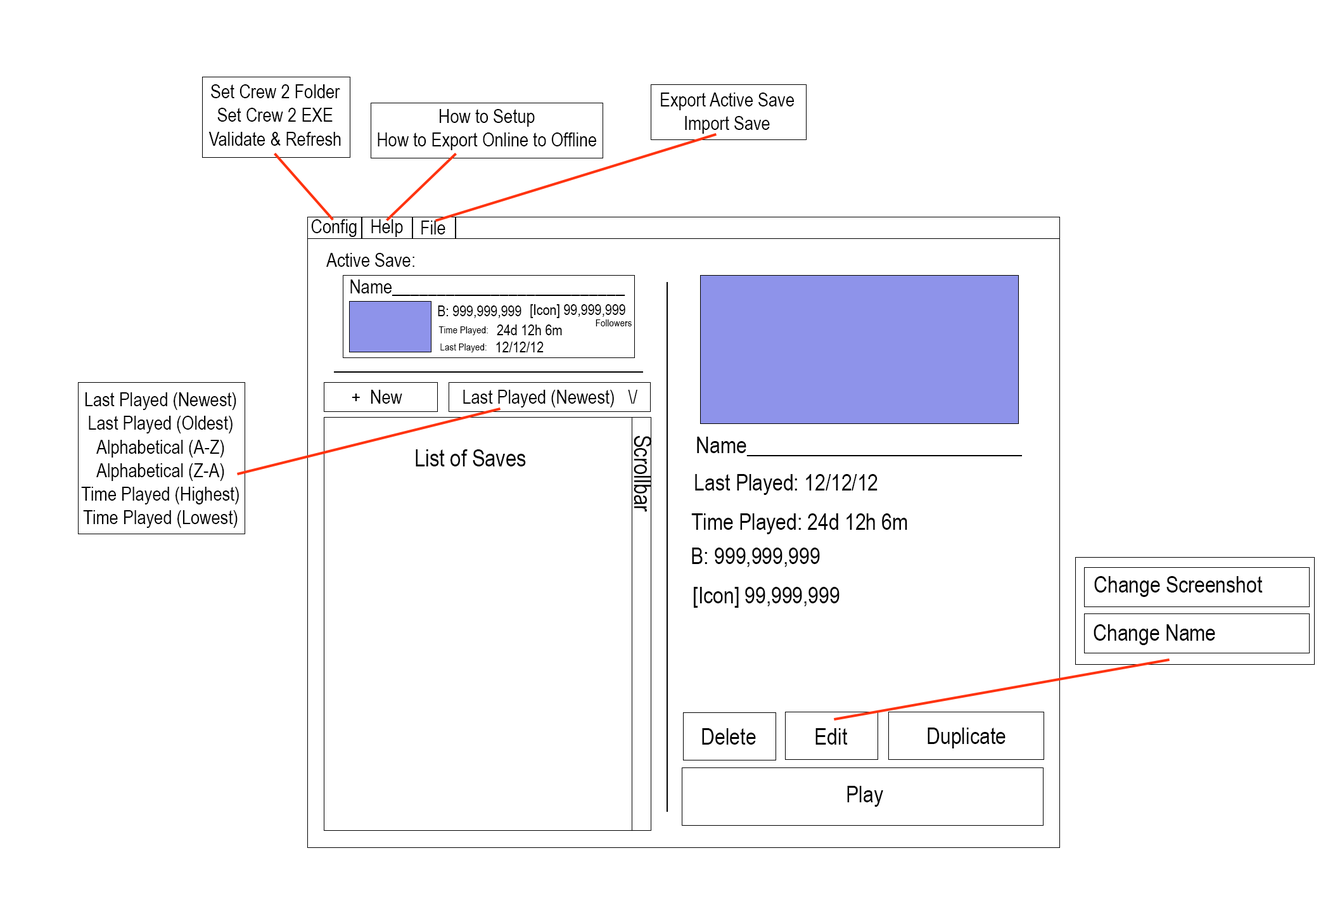
<style>
.page{position:relative;width:1328px;height:898px;background:#ffffff}
.page>*{position:absolute;margin:0}
.t1{font:19.6px "ArialNarrow";color:#000000}
.t2{font:15.2px "ArialNarrow";color:#000000}
.t3{font:10.4px "ArialNarrow";color:#000000}
.t4{font:23.8px "ArialNarrow";color:#000000}
.t5{font:23.2px "ArialNarrow";color:#000000}
</style>
<div class="page">
<p class="t1" style="left:208px;top:84px;width:133px;height:62px;text-align:center">Set Crew 2 Folder<br>Set Crew 2 EXE<br>Validate &amp; Refresh</p>
<p class="t1" style="left:661px;top:93px;width:133px;height:41px;text-align:center">Export Active Save<br>Import Save</p>
<p class="t1" style="left:378px;top:109px;width:218px;height:41px;text-align:center">How to Setup<br>How to Export Online to Offline</p>
<p class="t1" style="left:311px;top:219px;width:46px;height:18px">Config</p>
<p class="t1" style="left:371px;top:219px;width:32px;height:18px">Help</p>
<p class="t1" style="left:421px;top:221px;width:24px;height:13px">File</p>
<p class="t1" style="left:326px;top:253px;width:88px;height:14px">Active Save:</p>
<p class="t1" style="left:350px;top:279px;width:275px;height:17px">Name__________________________</p>
<p class="t2" style="left:438px;top:305px;width:83px;height:13px">B: 999,999,999</p>
<p class="t2" style="left:530px;top:304px;width:95px;height:14px">[Icon] 99,999,999</p>
<p class="t3" style="left:438px;top:326px;width:50px;height:9px">Time Played:</p>
<p class="t2" style="left:497px;top:324px;width:65px;height:11px">24d 12h 6m</p>
<p class="t3" style="left:596px;top:319px;width:36px;height:7px">Followers</p>
<p class="t2" style="left:496px;top:342px;width:48px;height:10px">12/12/12</p>
<p class="t3" style="left:440px;top:343px;width:47px;height:9px">Last Played:</p>
<p class="t1" style="left:352px;top:390px;width:50px;height:14px">New</p>
<p class="t1" style="left:463px;top:390px;width:174px;height:17px">Last Played (Newest)   \/</p>
<p class="t1" style="left:81px;top:392px;width:158px;height:136px;text-align:center">Last Played (Newest)<br>Last Played (Oldest)<br>Alphabetical (A-Z)<br>Alphabetical (Z-A)<br>Time Played (Highest)<br>Time Played (Lowest)</p>
<p class="t4" style="left:634px;top:435px;width:18px;height:77px;rotate:90deg">Scrollbar</p>
<p class="t5" style="left:697px;top:437px;width:325px;height:19px">Name__________________________</p>
<p class="t4" style="left:416px;top:449px;width:110px;height:17px">List of Saves</p>
<p class="t5" style="left:695px;top:474px;width:183px;height:21px">Last Played: 12/12/12</p>
<p class="t5" style="left:691px;top:513px;width:216px;height:21px">Time Played: 24d 12h 6m</p>
<p class="t5" style="left:692px;top:547px;width:128px;height:20px">B: 999,999,999</p>
<p class="t5" style="left:1094px;top:576px;width:169px;height:21px">Change Screenshot</p>
<p class="t5" style="left:694px;top:587px;width:146px;height:21px">[Icon] 99,999,999</p>
<p class="t5" style="left:1094px;top:624px;width:121px;height:21px">Change Name</p>
<p class="t5" style="left:702px;top:728px;width:54px;height:17px">Delete</p>
<p class="t5" style="left:815px;top:728px;width:33px;height:17px">Edit</p>
<p class="t5" style="left:928px;top:727px;width:78px;height:21px">Duplicate</p>
<p class="t5" style="left:847px;top:786px;width:36px;height:21px">Play</p>
</div>
